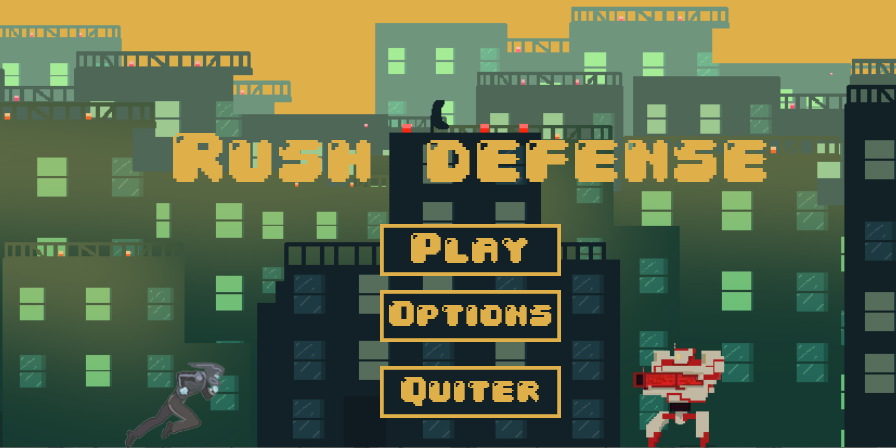
<style>
.page{position:relative;width:896px;height:448px}
.page>*{position:absolute;margin:0}
.t1{font:60px "04b30";color:#dfaf49}
.t2{font:36px "04b30";color:#dfaf49}
.t3{font:30px "04b30";color:#dfaf49}
</style>
<div class="page">
<p class="t1" style="left:173px;top:133px;width:594px;height:49px">Rush defense</p>
<p class="t2" style="left:411px;top:233px;width:117px;height:30px">Play</p>
<p class="t3" style="left:389px;top:301px;width:163px;height:25px">Options</p>
<p class="t3" style="left:401px;top:377px;width:138px;height:29px">Quiter</p>
</div>
